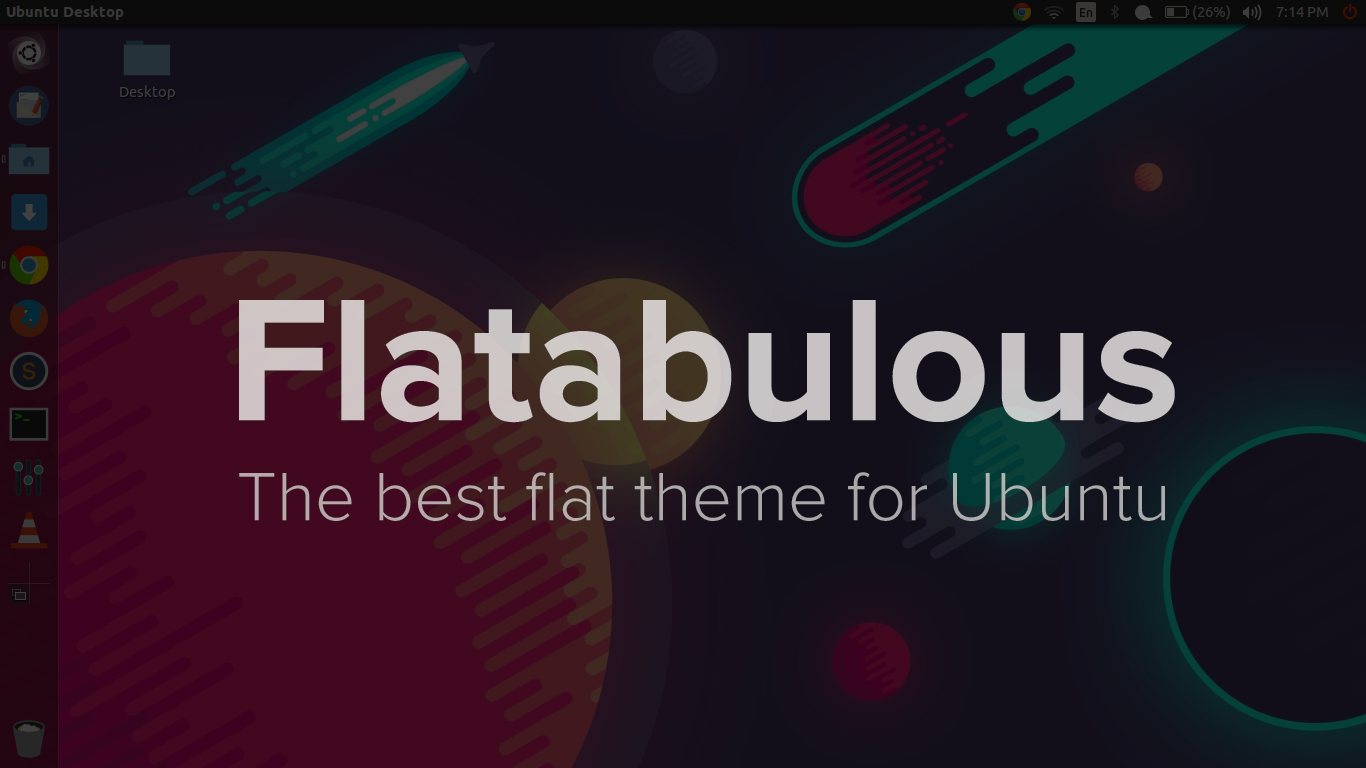
<style>
.page{position:relative;width:1366px;height:768px}
.page>*{position:absolute;margin:0}
.t1{font:180px "ProximaNova-Bold";color:#cfc5c5}
.t2{font:71px "ProximaNova-Light";color:#adabab}
</style>
<div class="page">
<p class="t1" style="left:239px;top:300px;width:936px;height:123px">Flatabulous</p>
<p class="t2" style="left:239px;top:472px;width:926px;height:49px">The best flat theme for Ubuntu</p>
</div>
